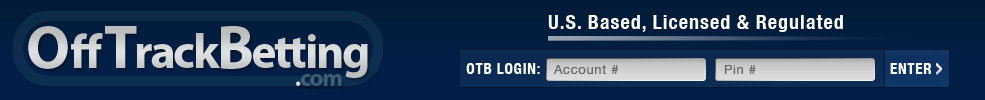
<style>
.page{position:relative;width:985px;height:100px}
.page>*{position:absolute;margin:0}
.t1{font:48.6px "MyriadPro-Bold";letter-spacing:-0.05em;color:#e0e2e2}
.t2{font:60.8px "MyriadPro-Bold";color:#e0e2e2}
.t3{font:48.6px "MyriadPro-Bold";letter-spacing:0.05em;color:#e0e2e2}
.t4{font:60.8px "MyriadPro-Bold";letter-spacing:-0.05em;color:#e0e2e2}
.t5{font:20px "HelveticaNeue-CondensedBold";letter-spacing:0.05em;color:#ffffff}
.t6{font:15px "HelveticaNeue-CondensedBold";letter-spacing:0.05em;color:#ffffff}
.t7{font:13px "HelveticaNeue";letter-spacing:0.05em;color:#666666}
.t8{font:24px "MyriadPro-Bold";letter-spacing:-0.05em;color:#3e647e}
.t9{font:24px "MyriadPro-Bold";letter-spacing:-0.05em;color:#ffffff}
</style>
<div class="page">
<p class="t1" style="left:26px;top:17px;width:342px;height:66px"><span class="t2">O</span><span class="t3">ff</span><span class="t4">T</span>rack<span class="t4">B</span>etting</p>
<p class="t5" style="left:548px;top:12px;width:297px;height:21px">U.S. Based, Licensed &amp; Regulated</p>
<p class="t6" style="left:462px;top:61px;width:78px;height:16px">OTB LOGIN:</p>
<p class="t7" style="left:554px;top:63px;width:65px;height:14px">Account #</p>
<p class="t7" style="left:724px;top:63px;width:33px;height:14px">Pin #</p>
<p class="t6" style="left:890px;top:61px;width:42px;height:16px">ENTER</p>
<p class="t8" style="left:296px;top:74px;width:46px;height:12px"><span class="t9">.</span>com</p>
</div>
